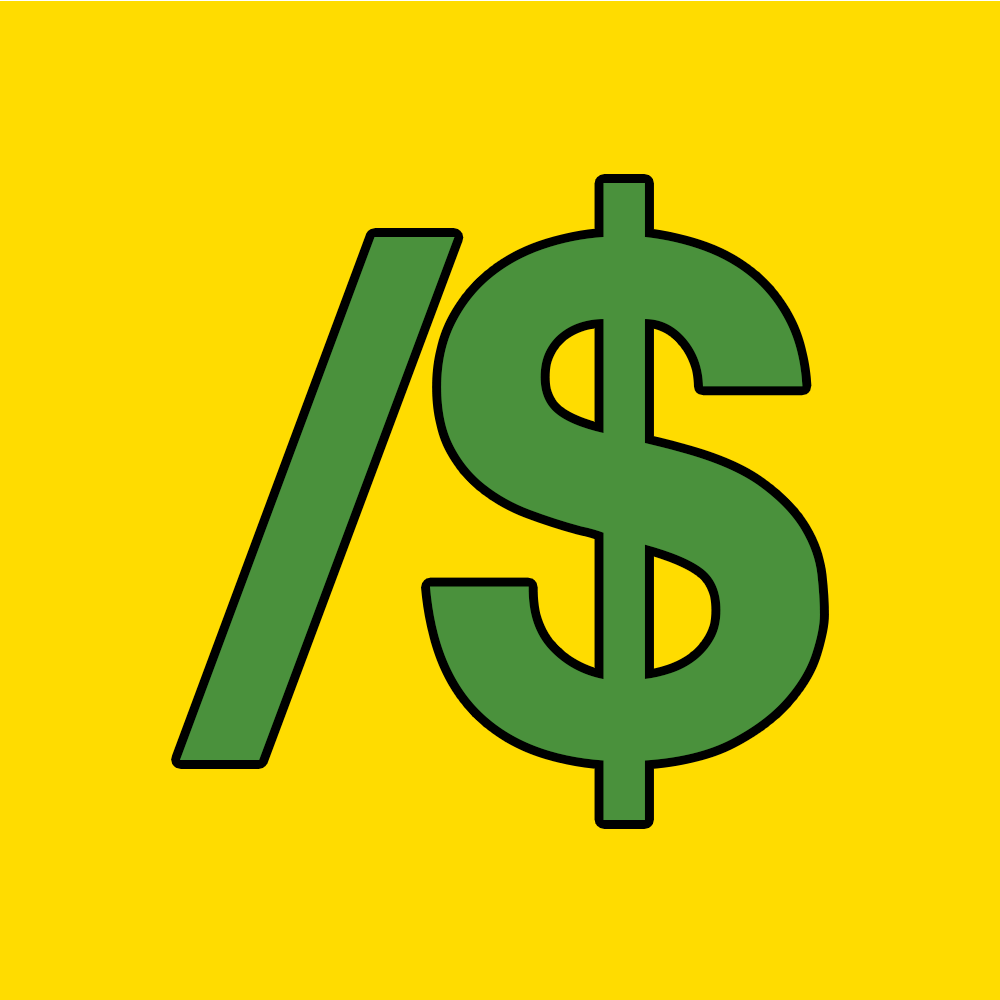
<style>
.page{position:relative;width:1000px;height:1000px;background:#ffdc00}
.page>*{position:absolute;margin:0}
.t1{font:700px "HelveticaNeue-Bold";letter-spacing:-0.025em;color:#4a913c;text-transform:uppercase}
</style>
<div class="page">
<p class="t1" style="left:180px;top:183px;width:640px;height:637px">/$</p>
</div>
